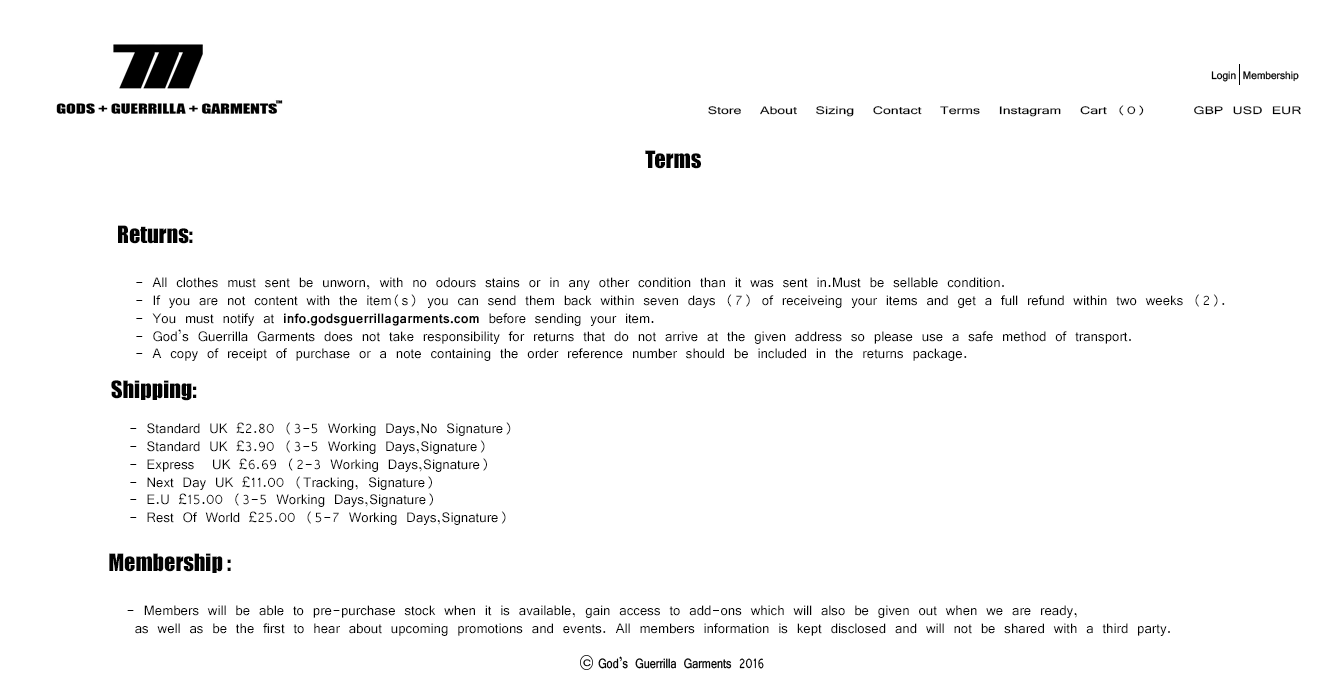
<style>
.page{position:relative;width:1332px;height:683px;background:#ffffff}
.page>*{position:absolute;margin:0}
.t1{font:11.7px "Vrinda";color:#000000;scale:1.35 1}
.t2{font:22.2px "Impact";color:#020202}
.t3{font:14.8px "Vrinda";color:#020202}
.t4{font:14.8px "Vrinda-Bold";color:#020202}
</style>
<div class="page">
<p class="t1" style="left:708px;top:105px;width:593px;height:12px">Store  About  Sizing  Contact  Terms  Instagram  Cart (0)     GBP USD EUR</p>
<p class="t2" style="left:645px;top:150px;width:56px;height:19px">Terms</p>
<p class="t3" style="left:118px;top:225px;width:1107px;height:136px"><span class="t2">Returns: <br><br></span>  - All clothes must sent be unworn, with no odours stains or in any other condition than it was sent in.Must be sellable condition.<br>  - If you are not content with the item(s) you can send them back within seven days (7) of receiveing your items and get a full refund within two weeks (2).<br>  - You must notify at <span class="t4">info.godsguerrillagarments.com</span> before sending your item.<br>  - God’s Guerrilla Garments does not take responsibility for returns that do not arrive at the given address so please use a safe method of transport.<br>  - A copy of receipt of purchase or a note containing the order reference number should be included in the returns package.</p>
<p class="t3" style="left:111px;top:380px;width:400px;height:145px"><span class="t2">Shipping:<br></span><br>  - Standard UK £2.80 (3-5 Working Days,No Signature)<br>  - Standard UK £3.90 (3-5 Working Days,Signature)<br>  - Express  UK £6.69 (2-3 Working Days,Signature)<br>  - Next Day UK £11.00 (Tracking, Signature)<br>  - E.U £15.00 (3-5 Working Days,Signature)<br>  - Rest Of World £25.00 (5-7 Working Days,Signature)</p>
<p class="t3" style="left:109px;top:553px;width:1061px;height:83px"><span class="t2">Membership : <br><br></span>  - Members will be able to pre-purchase stock when it is available, gain access to add-ons which will also be given out when we are ready,<br>   as well as be the first to hear about upcoming promotions and events. All members information is kept disclosed and will not be shared with a third party.</p>
</div>
